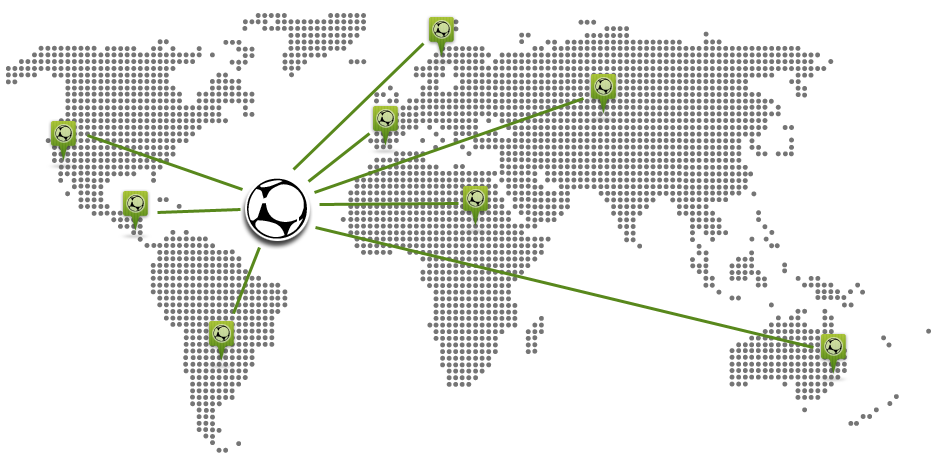
<style>
.page{position:relative;width:940px;height:469px;background:#ffffff}
.page>*{position:absolute;margin:0}
.t1{font:16.1px "Soccer-Dance-Regular";color:#000000}
</style>
<div class="page">
<p class="t1" style="left:433px;top:21px;width:17px;height:17px">x</p>
<p class="t1" style="left:595px;top:78px;width:17px;height:17px">x</p>
<p class="t1" style="left:377px;top:110px;width:17px;height:17px">x</p>
<p class="t1" style="left:55px;top:125px;width:17px;height:17px">x</p>
<p class="t1" style="left:127px;top:195px;width:17px;height:17px">x</p>
<p class="t1" style="left:467px;top:190px;width:17px;height:17px">x</p>
<p class="t1" style="left:213px;top:325px;width:17px;height:17px">x</p>
<p class="t1" style="left:825px;top:338px;width:17px;height:17px">x</p>
</div>
